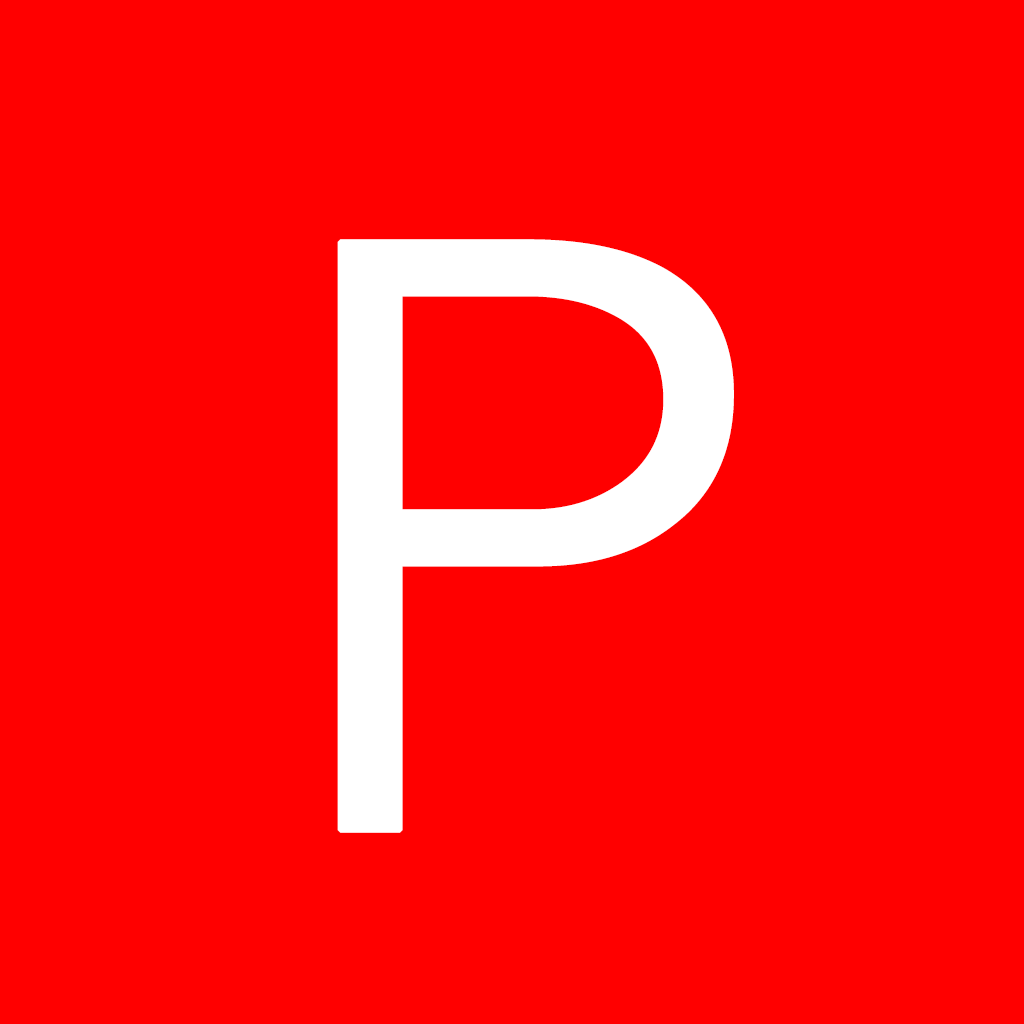
<style>
.page{position:relative;width:1024px;height:1024px;background:#ff0000}
.page>*{position:absolute;margin:0}
.t1{font:750px "AppleGothic";color:#ffffff;font-weight:bold}
</style>
<div class="page">
<p class="t1" style="left:337px;top:239px;width:397px;height:594px">P</p>
</div>
